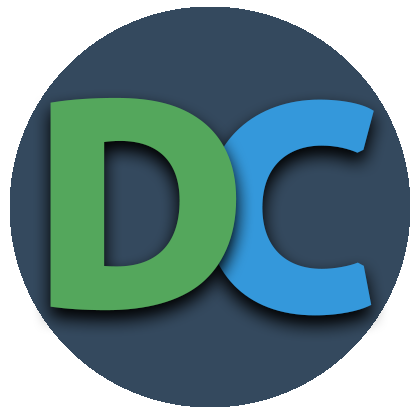
<style>
.page{position:relative;width:412px;height:411px;background:#34495e}
.page>*{position:absolute;margin:0}
.t1{font:416.7px "MyriadArabic-Bold";color:#54a75c;font-weight:bold}
.t2{font:416.7px "MyriadArabic-Bold";color:#3498db;font-weight:bold}
</style>
<div class="page">
<p class="t1" style="left:50px;top:97px;width:187px;height:214px">D</p>
<p class="t2" style="left:206px;top:99px;width:168px;height:217px">C</p>
</div>
